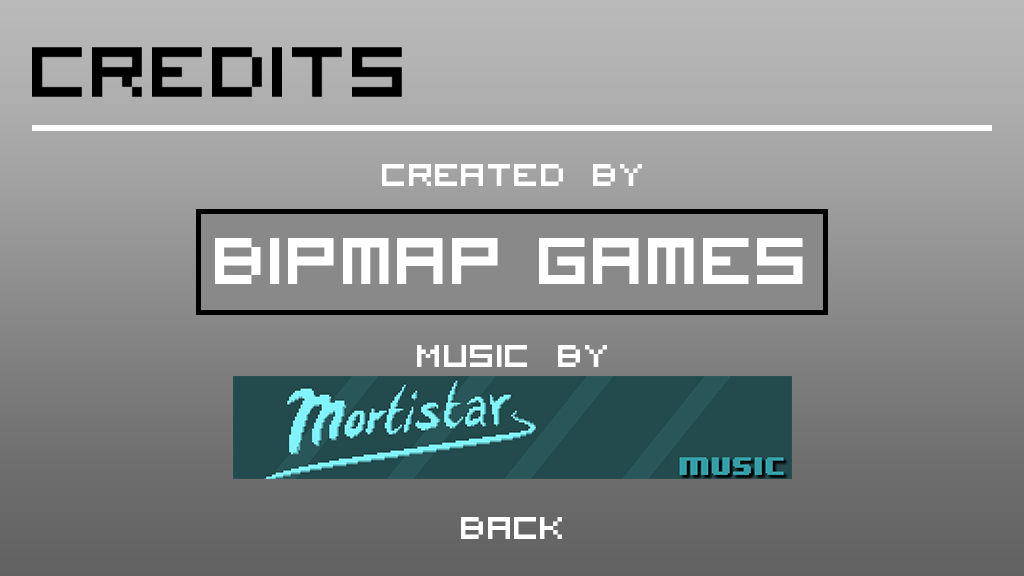
<style>
.page{position:relative;width:1024px;height:576px}
.page>*{position:absolute;margin:0}
.t1{font:44px "VisitorTT1BRK";color:#ffffff}
.t2{font:91px "VisitorTT1BRK";color:#ffffff}
</style>
<div class="page">
<p class="t1" style="left:382px;top:164px;width:260px;height:22px">Created By</p>
<p class="t2" style="left:215px;top:238px;width:588px;height:46px">Bipmap Games</p>
<p class="t1" style="left:417px;top:345px;width:190px;height:22px">Music By</p>
<p class="t1" style="left:461px;top:517px;width:101px;height:22px">Back</p>
</div>
